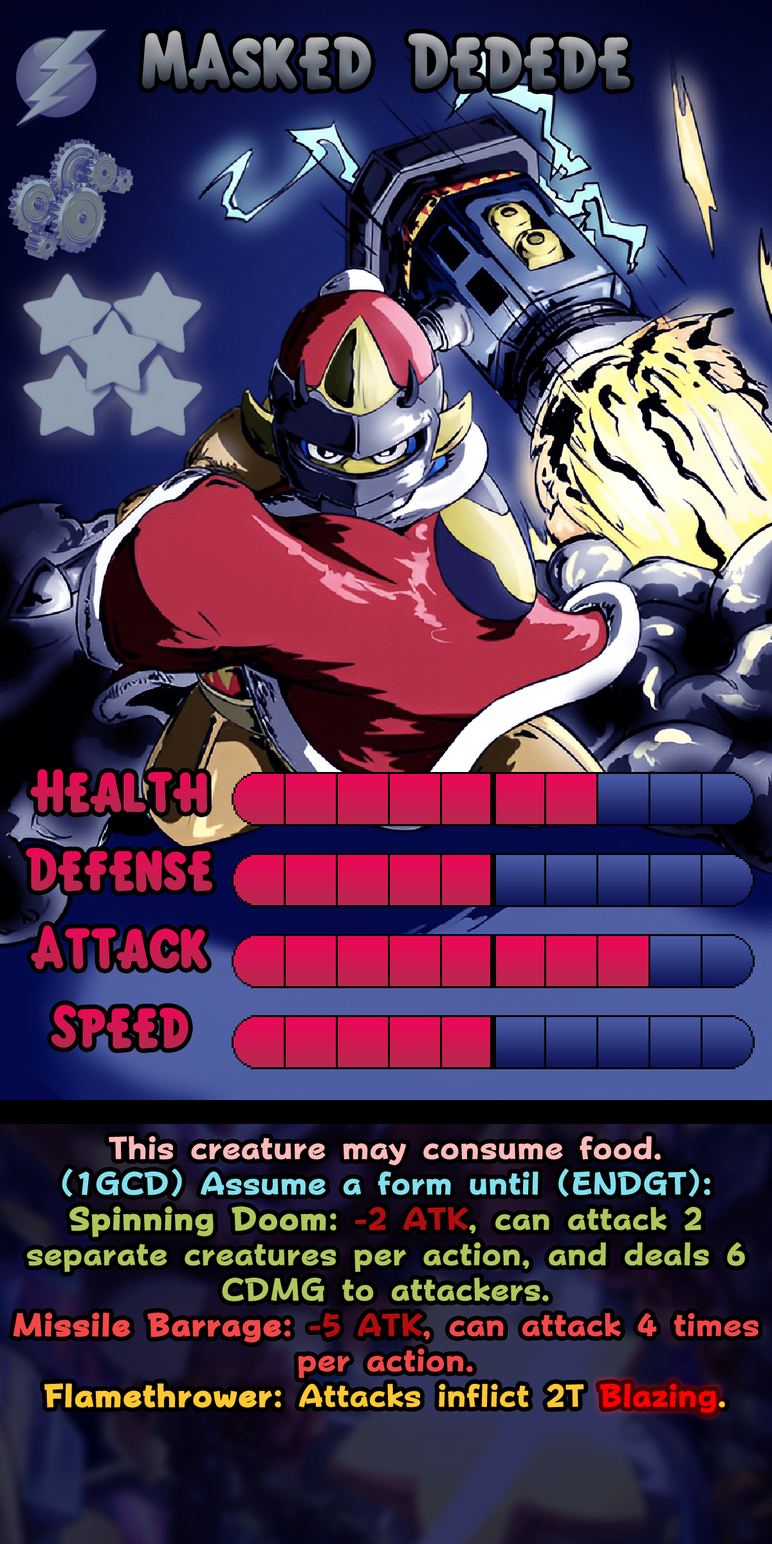
<style>
.page{position:relative;width:772px;height:1544px}
.page>*{position:absolute;margin:0}
.t1{font:120.3px "KirbyClassic"}
.t2{font:92.7px "KirbyClassic";color:#cf1952}
.t3{font:92.7px "KirbyClassic";color:#d11853}
.t4{font:92.7px "KirbyClassic";color:#d21753}
.t5{font:54.7px/35.4px "FOTPopHappinessStrp-ExtraBold";color:#b0c55b}
.t6{font:54.7px/35.4px "FOTPopHappinessStrp-ExtraBold";color:#ffbaba}
.t7{font:54.7px/35.4px "FOTPopHappinessStrp-ExtraBold";color:#82dfed}
.t8{font:54.7px/35.4px "FOTPopHappinessStrp-ExtraBold";color:#b0c55b;font-weight:bold}
.t9{font:54.7px/35.4px "FOTPopHappinessStrp-ExtraBold";color:#b20d0d}
.t10{font:54.7px/35.4px "FOTPopHappinessStrp-ExtraBold";color:#f24848;font-weight:bold}
.t11{font:54.7px/35.4px "FOTPopHappinessStrp-ExtraBold";color:#f24848}
.t12{font:54.7px/35.4px "FOTPopHappinessStrp-ExtraBold";color:#ffc833;font-weight:bold}
.t13{font:54.7px/35.4px "FOTPopHappinessStrp-ExtraBold";color:#ffc833}
.t14{font:54.7px/35.4px "FOTPopHappinessStrp-ExtraBold";color:#ff0000}
.t15{font:54.7px "FOTPopHappinessStrp-ExtraBold";color:#ff0000}
</style>
<div class="page">
<p class="t1" style="left:142px;top:30px;width:489px;height:60px">MAsked Dedede</p>
<p class="t2" style="left:30px;top:769px;width:178px;height:44px">Health</p>
<p class="t3" style="left:26px;top:848px;width:186px;height:44px">Defense</p>
<p class="t2" style="left:31px;top:925px;width:176px;height:45px">Attack</p>
<p class="t4" style="left:51px;top:1005px;width:138px;height:44px">Speed</p>
<p class="t5" style="left:13px;top:1136px;width:746px;height:277px;text-align:center"><span class="t6">This creature may consume food.<br></span><span class="t7">(1GCD) Assume a form until (ENDGT):<br></span><span class="t8">Spinning Doom</span>: <span class="t9">-2 ATK</span>, can attack 2 separate creatures per action, and deals 6 CDMG to attackers.<br><span class="t10">Missile Barrage</span><span class="t11">: </span><span class="t9">-5 ATK</span><span class="t11">, can attack 4 times per action.<br></span><span class="t12">Flamethrower</span><span class="t13">: Attacks inflict 2T </span><span class="t14">Blazing</span><span class="t13">.</span></p>
<p class="t15" style="left:600px;top:1384px;width:116px;height:29px">Blazing</p>
</div>
